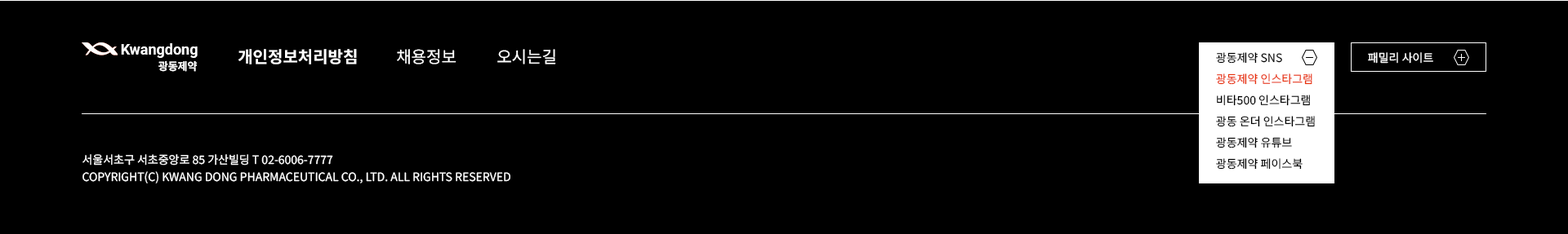
<style>
.page{position:relative;width:1568px;height:234px;background:#000000}
.page>*{position:absolute;margin:0}
.t1{font:14.7px "Roboto-Bold";color:#ffffff}
.t2{font:16.3px "NotoSansKR-Bold";color:#ffffff}
.t3{font:16.3px "NotoSansKR-Regular";color:#ffffff}
.t4{font:11.4px/21.2px "NotoSansKR-Regular";color:#000000}
.t5{font:11.4px/21.2px "NotoSansKR-Regular";color:#e8340d}
.t6{font:11.4px "NotoSansKR-Regular";color:#ffffff}
.t7{font:10.6px "NotoSansKR-Bold";color:#ffffff}
.t8{font:11.4px/17.1px "NotoSansKR-Regular";color:#ffffff}
</style>
<div class="page">
<p class="t1" style="left:121px;top:43px;width:77px;height:15px">Kwangdong</p>
<p class="t2" style="left:238px;top:49px;width:119px;height:16px">개인정보처리방침</p>
<p class="t3" style="left:397px;top:49px;width:60px;height:16px">채용정보</p>
<p class="t3" style="left:497px;top:49px;width:59px;height:16px">오시는길</p>
<p class="t4" style="left:1216px;top:52px;width:99px;height:118px">광동제약 SNS<br><span class="t5">광동제약 인스타그램<br></span>비타500 인스타그램<br>광동 온더 인스타그램<br>광동제약 유튜브<br>광동제약 페이스북</p>
<p class="t6" style="left:1368px;top:52px;width:65px;height:12px">패밀리 사이트</p>
<p class="t7" style="left:158px;top:60px;width:40px;height:12px">광동제약</p>
<p class="t8" style="left:82px;top:154px;width:428px;height:30px">서울서초구 서초중앙로 85 가산빌딩 T 02-6006-7777<br>COPYRIGHT(C) KWANG DONG PHARMACEUTICAL CO., LTD. ALL RIGHTS RESERVED</p>
</div>
